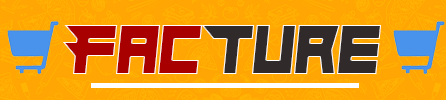
<style>
.page{position:relative;width:446px;height:100px;background:#ffa604}
.page>*{position:absolute;margin:0}
.t1{font:70.9px "Hindsight2020";color:#a80000;scale:0.94 1}
.t2{font:70.9px "Hindsight2020";color:#302a2a;scale:0.94 1}
</style>
<div class="page">
<p class="t1" style="left:63px;top:25px;width:139px;height:49px">Fac</p>
<p class="t2" style="left:201px;top:25px;width:180px;height:49px">Ture</p>
</div>
